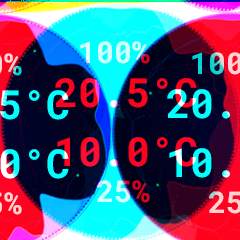
<style>
.page{position:relative;width:240px;height:240px}
.page>*{position:absolute;margin:0}
.t1{font:30px "RobotoMono-Bold"}
.t2{font:40px "RobotoMono-Bold"}
</style>
<div class="page">
<p class="t1" style="left:80px;top:39px;width:70px;height:23px">100%</p>
<p class="t2" style="left:55px;top:76px;width:142px;height:30px">20.5°C</p>
<p class="t2" style="left:57px;top:135px;width:140px;height:30px">10.0°C</p>
<p class="t1" style="left:97px;top:178px;width:53px;height:23px">25%</p>
</div>
